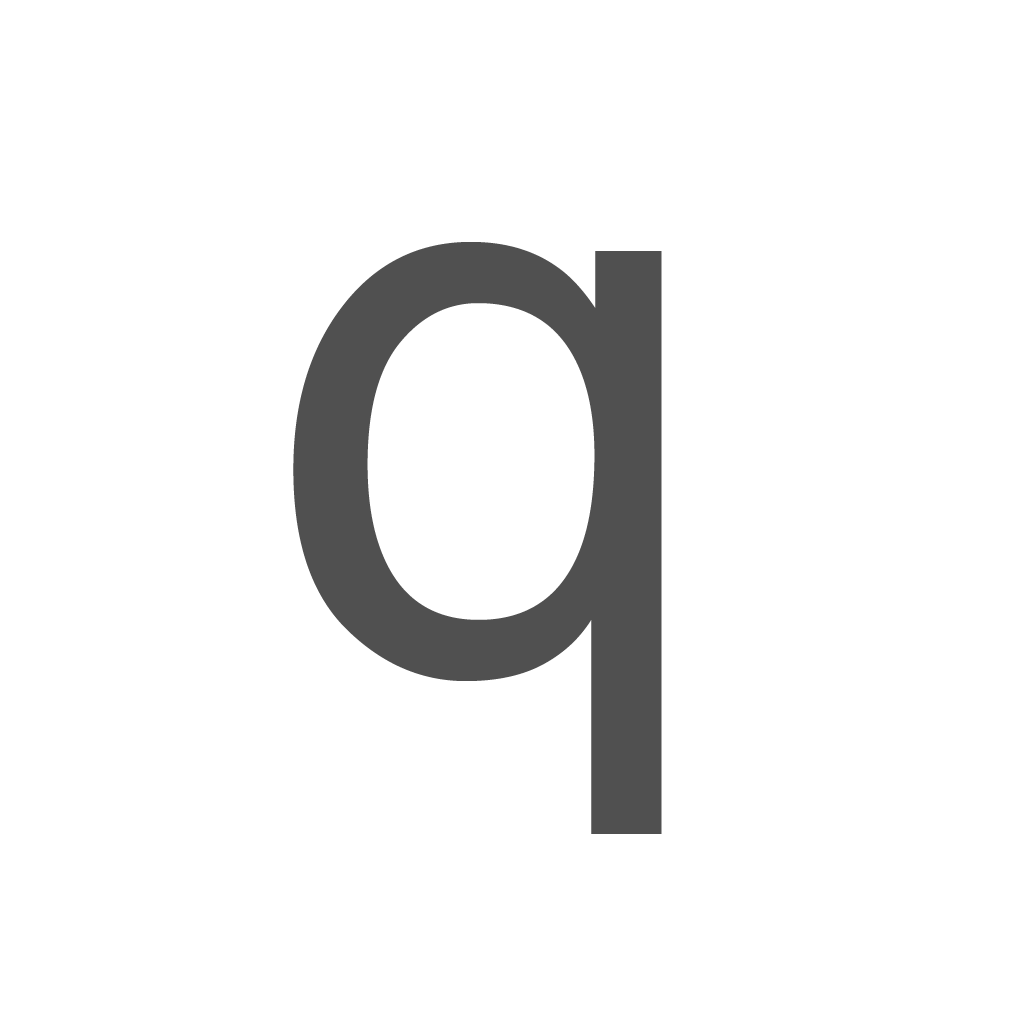
<style>
.page{position:relative;width:1024px;height:1024px;background:#ffffff}
.page>*{position:absolute;margin:0}
.t1{font:796.6px "Helvetica";color:#505050}
</style>
<div class="page">
<p class="t1" style="left:293px;top:242px;width:369px;height:592px">q</p>
</div>
